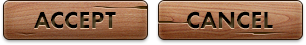
<style>
.page{position:relative;width:306px;height:45px}
.page>*{position:absolute;margin:0}
.t1{font:24px "FuturaPT-Heavy";text-transform:uppercase}
</style>
<div class="page">
<p class="t1" style="left:34px;top:11px;width:82px;height:18px">Accept</p>
<p class="t1" style="left:187px;top:11px;width:86px;height:18px">Cancel</p>
</div>
